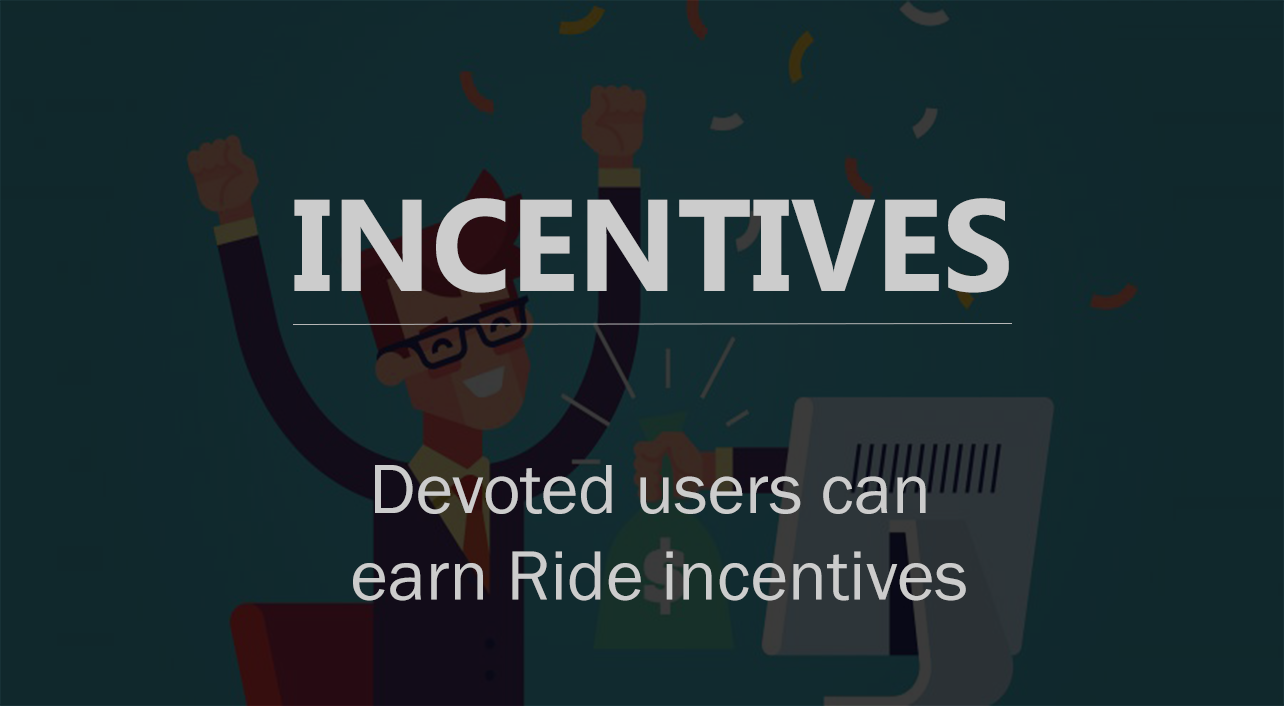
<style>
.page{position:relative;width:1284px;height:706px;background:#10282c}
.page>*{position:absolute;margin:0}
.t1{font:130px "MicrosoftTaiLe-Bold";color:#cccccc}
.t2{font:72px "FranklinGothic-Book";color:#cccccc}
</style>
<div class="page">
<p class="t1" style="left:294px;top:198px;width:715px;height:95px">INCENTIVES</p>
<p class="t2" style="left:353px;top:465px;width:613px;height:136px;text-align:center">Devoted users can <br>earn Ride incentives</p>
</div>
